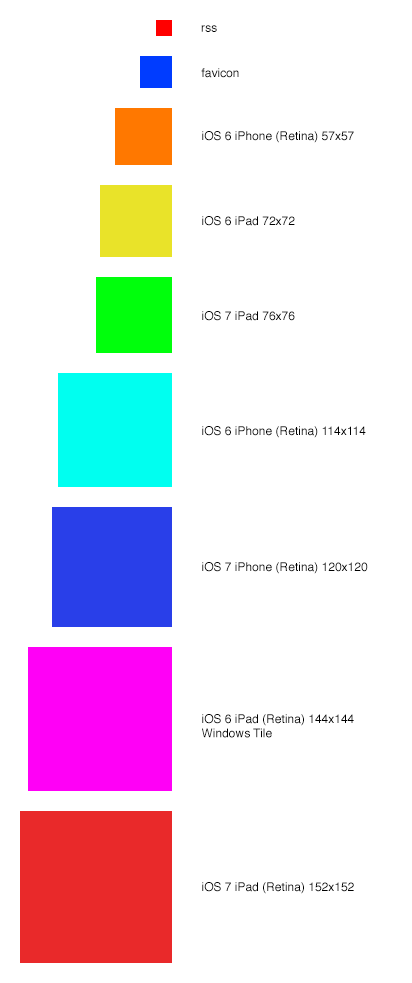
<style>
.page{position:relative;width:412px;height:983px;background:#ffffff}
.page>*{position:absolute;margin:0}
.t1{font:12px "Helvetica";color:#000000}
</style>
<div class="page">
<p class="t1" style="left:201px;top:25px;width:16px;height:7px">rss</p>
<p class="t1" style="left:201px;top:68px;width:38px;height:10px">favicon</p>
<p class="t1" style="left:202px;top:131px;width:152px;height:12px">iOS 6 iPhone (Retina) 57x57</p>
<p class="t1" style="left:202px;top:216px;width:93px;height:10px">iOS 6 iPad 72x72</p>
<p class="t1" style="left:202px;top:311px;width:93px;height:10px">iOS 7 iPad 76x76</p>
<p class="t1" style="left:202px;top:426px;width:164px;height:12px">iOS 6 iPhone (Retina) 114x114</p>
<p class="t1" style="left:202px;top:562px;width:166px;height:12px">iOS 7 iPhone (Retina) 120x120</p>
<p class="t1" style="left:202px;top:714px;width:152px;height:24px">iOS 6 iPad (Retina) 144x144<br>Windows Tile</p>
<p class="t1" style="left:202px;top:882px;width:152px;height:12px">iOS 7 iPad (Retina) 152x152</p>
</div>
